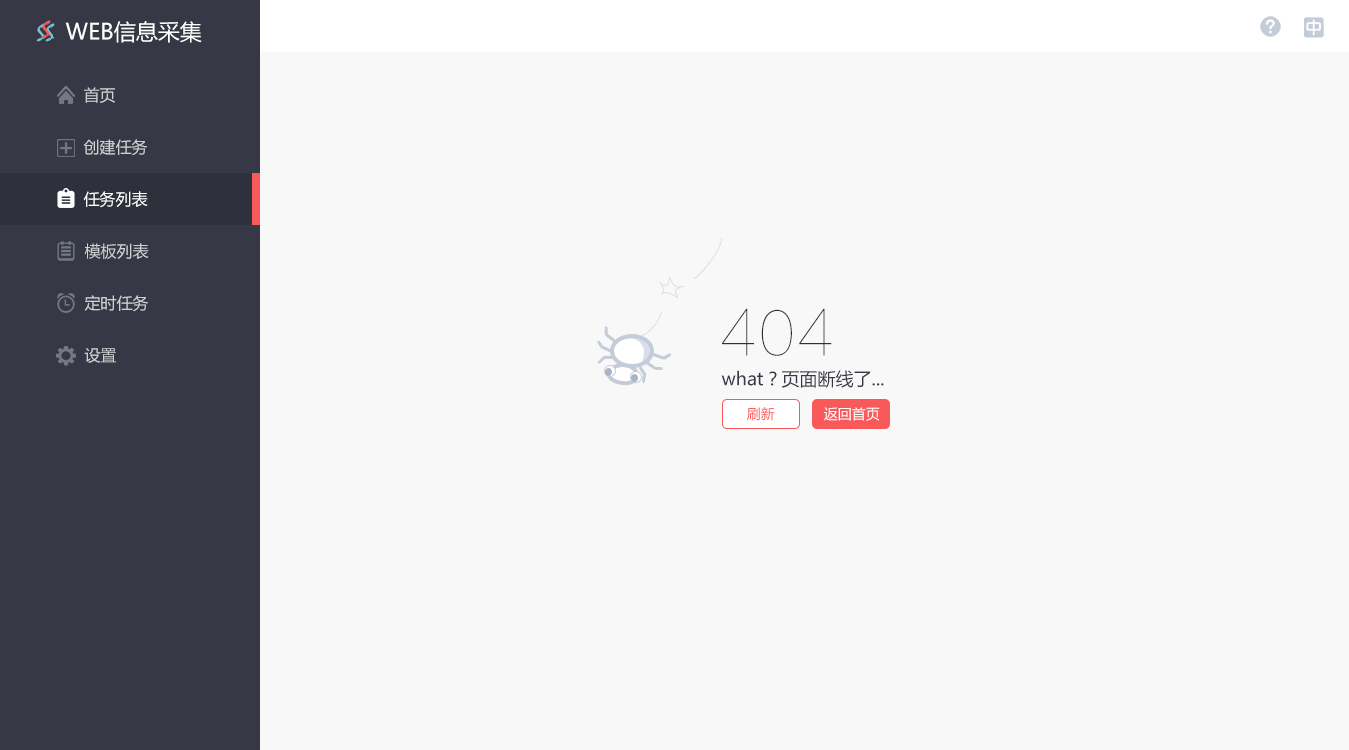
<style>
.page{position:relative;width:1349px;height:750px;background:#f8f8f8}
.page>*{position:absolute;margin:0}
.t1{font:24px "Mistral";color:#78c3d2}
.t2{font:24px "Mistral";color:#f95959}
.t3{font:22px "MicrosoftYaHei";color:#ffffff}
.t4{font:16px "MicrosoftYaHei";color:#d1d1d3}
.t5{font:16px "MicrosoftYaHei";color:#ffffff}
.t6{font:60px "FZLTCXHJW--GB1-0";color:#2e303c}
.t7{font:18px "MicrosoftYaHei";color:#363845}
.t8{font:14px "MicrosoftYaHei";color:#f95959}
.t9{font:14px "MicrosoftYaHei";color:#ffffff}
</style>
<div class="page">
<p class="t1" style="left:36px;top:23px;width:10px;height:19px">S</p>
<p class="t2" style="left:41px;top:20px;width:10px;height:19px">S</p>
<p class="t1" style="left:45px;top:23px;width:10px;height:19px">S</p>
<p class="t3" style="left:65px;top:21px;width:137px;height:22px">WEB信息采集</p>
<p class="t4" style="left:84px;top:87px;width:31px;height:16px">首页</p>
<p class="t4" style="left:83px;top:139px;width:65px;height:17px">创建任务</p>
<p class="t5" style="left:83px;top:191px;width:65px;height:17px">任务列表</p>
<p class="t4" style="left:84px;top:243px;width:65px;height:16px">模板列表</p>
<p class="t4" style="left:84px;top:295px;width:65px;height:17px">定时任务</p>
<p class="t6" style="left:722px;top:308px;width:110px;height:48px">404</p>
<p class="t4" style="left:84px;top:348px;width:32px;height:15px">设置</p>
<p class="t7" style="left:721px;top:370px;width:163px;height:18px">what？页面断线了...</p>
<p class="t8" style="left:747px;top:407px;width:28px;height:14px">刷新</p>
<p class="t9" style="left:824px;top:407px;width:56px;height:14px">返回首页</p>
</div>
